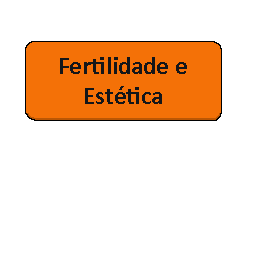
<style>
.page{position:relative;width:256px;height:256px;background:#ffffff}
.page>*{position:absolute;margin:0}
.t1{font:25px "Calibri-Bold";color:#141619}
</style>
<div class="page">
<p class="t1" style="left:60px;top:57px;width:127px;height:47px;text-align:center">Fertilidade e Estética</p>
</div>
